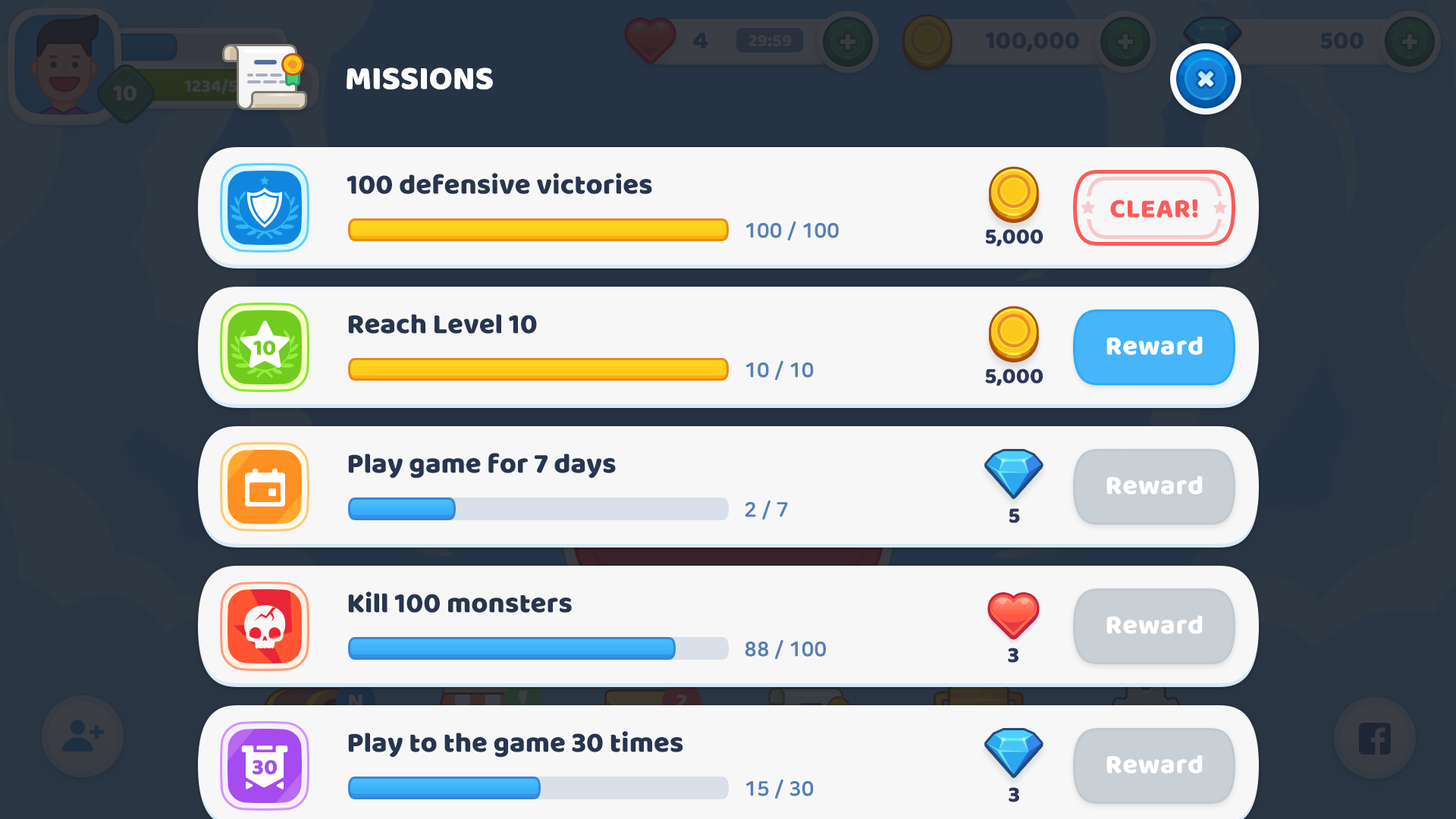
<style>
.page{position:relative;width:1456px;height:819px;background:#f7f7f7}
.page>*{position:absolute;margin:0}
.t1{font:33.4px "BalooBhaijaan-Regular";color:#ffffff;text-transform:uppercase}
.t2{font:28.8px "BalooBhaijaan-Regular";color:#273550}
.t3{font:27.3px "BalooBhaijaan-Regular";color:#fd5a5a;text-transform:uppercase}
.t4{font:20.5px "NanumSquareRoundOTFEB";color:#5580b4}
.t5{font:22.7px "BalooBhaijaan-Regular";color:#2c375f}
.t6{font:22.7px "BalooBhaijaan-Regular";color:#71cc20;text-transform:uppercase}
.t7{font:27.3px "BalooBhaijaan-Regular";color:#ffffff}
.t8{font:22.7px "BalooBhaijaan-Regular";color:#a64bf0;text-transform:uppercase}
</style>
<div class="page">
<p class="t1" style="left:347px;top:67px;width:146px;height:22px">Missions</p>
<p class="t2" style="left:347px;top:173px;width:305px;height:21px">100 defensive victories</p>
<p class="t3" style="left:1110px;top:199px;width:88px;height:19px">clear!</p>
<p class="t4" style="left:746px;top:221px;width:93px;height:20px">100 / 100</p>
<p class="t5" style="left:985px;top:229px;width:58px;height:17px">5,000</p>
<p class="t2" style="left:348px;top:314px;width:189px;height:20px">Reach Level 10</p>
<p class="t6" style="left:253px;top:340px;width:23px;height:16px">10</p>
<p class="t7" style="left:1106px;top:336px;width:97px;height:19px">Reward</p>
<p class="t4" style="left:746px;top:360px;width:68px;height:21px">10 / 10</p>
<p class="t5" style="left:985px;top:369px;width:58px;height:17px">5,000</p>
<p class="t2" style="left:348px;top:453px;width:268px;height:26px">Play game for 7 days</p>
<p class="t7" style="left:1106px;top:475px;width:97px;height:19px">Reward</p>
<p class="t4" style="left:745px;top:500px;width:43px;height:20px">2 / 7</p>
<p class="t5" style="left:1009px;top:508px;width:11px;height:15px">5</p>
<p class="t2" style="left:348px;top:591px;width:224px;height:22px">Kill 100 monsters</p>
<p class="t7" style="left:1106px;top:615px;width:97px;height:19px">Reward</p>
<p class="t4" style="left:745px;top:639px;width:81px;height:21px">88 / 100</p>
<p class="t5" style="left:1008px;top:648px;width:10px;height:15px">3</p>
<p class="t2" style="left:348px;top:731px;width:335px;height:27px">Play to the game 30 times</p>
<p class="t8" style="left:253px;top:760px;width:25px;height:15px">30</p>
<p class="t7" style="left:1106px;top:755px;width:97px;height:18px">Reward</p>
<p class="t4" style="left:746px;top:779px;width:68px;height:20px">15 / 30</p>
<p class="t5" style="left:1009px;top:787px;width:10px;height:15px">3</p>
</div>
